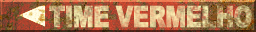
<style>
.page{position:relative;width:256px;height:32px}
.page>*{position:absolute;margin:0}
.t1{font:29.3px "Arial-Black";letter-spacing:-0.04em;text-transform:uppercase;font-weight:bold;scale:0.75 1}
</style>
<div class="page">
<p class="t1" style="left:49px;top:5px;width:203px;height:23px">TIME VERMELHO</p>
</div>
